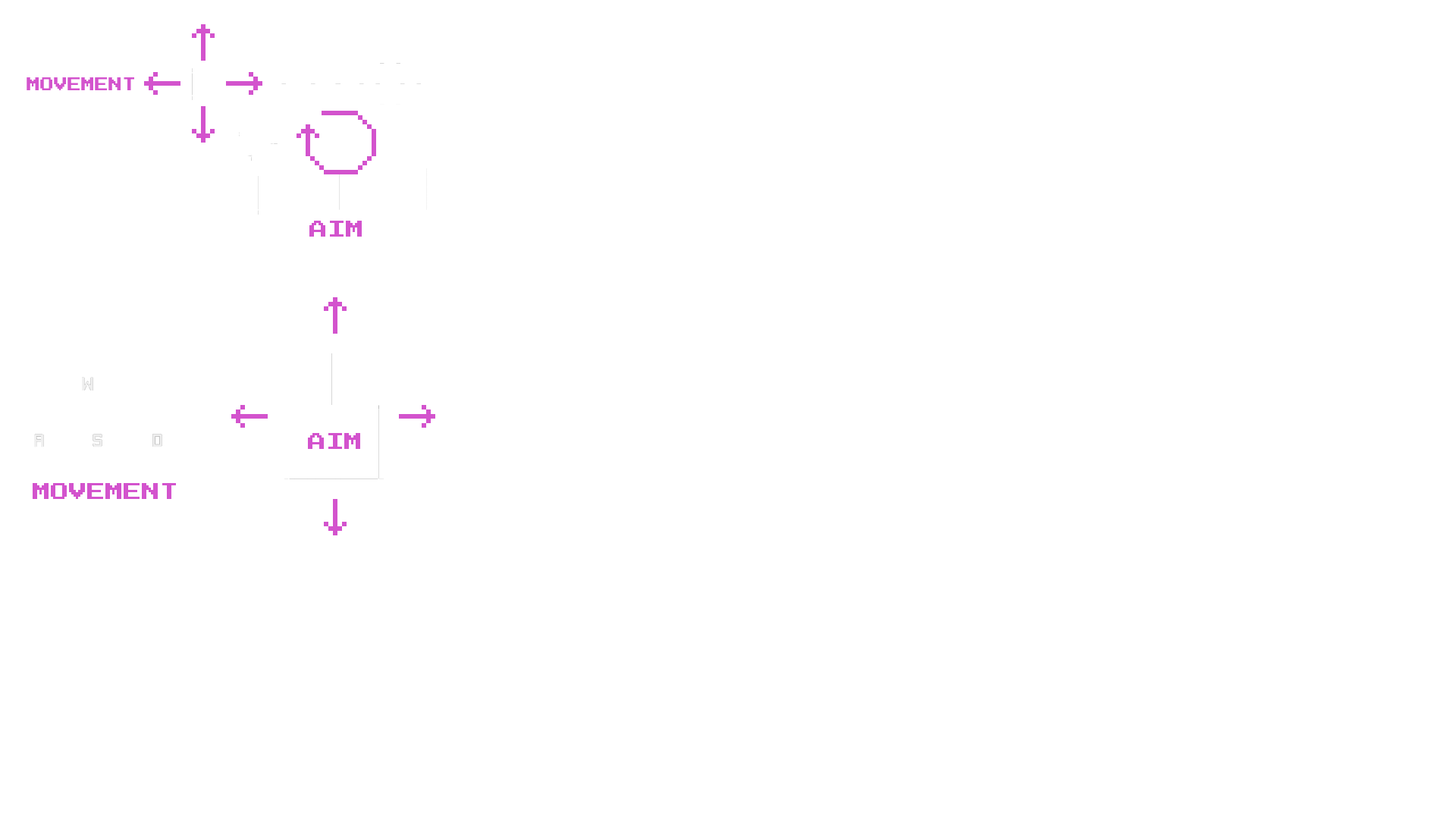
<style>
.page{position:relative;width:1456px;height:819px;background:#ffffff}
.page>*{position:absolute;margin:0}
.t1{font:13.6px "PressStart2P-Regular";color:#d353cd}
.t2{font:18.2px "PressStart2P-Regular";color:#d353cd}
</style>
<div class="page">
<p class="t1" style="left:27px;top:77px;width:107px;height:13px">MOVEMENT</p>
<p class="t2" style="left:309px;top:221px;width:53px;height:16px">AIM</p>
<p class="t2" style="left:308px;top:433px;width:52px;height:16px">AIM</p>
<p class="t2" style="left:33px;top:483px;width:143px;height:16px">MOVEMENT</p>
</div>
